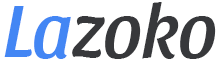
<style>
.page{position:relative;width:221px;height:60px;background:#ffffff}
.page>*{position:absolute;margin:0}
.t1{font:77px "Sansita-Italic";color:#37383b}
.t2{font:77px "Sansita-Italic";color:#ffffff}
.t3{font:77px "Sansita-Italic";color:#4386f4}
</style>
<div class="page">
<p class="t1" style="left:4px;top:2px;width:212px;height:57px"><span class="t2">L</span><span class="t3">a</span>zoko</p>
</div>
